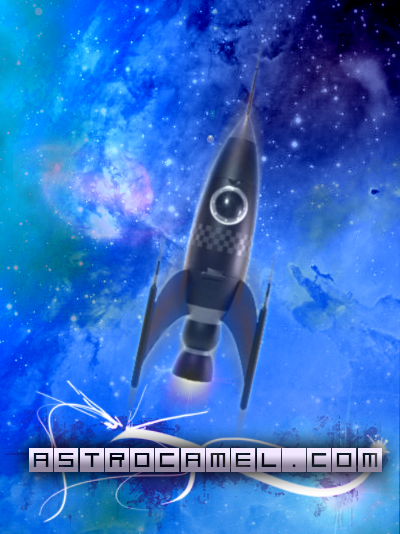
<style>
.page{position:relative;width:400px;height:534px}
.page>*{position:absolute;margin:0}
.t1{font:37px "Qubix"}
</style>
<div class="page">
<p class="t1" style="left:29px;top:448px;width:353px;height:24px">astrocamel.com</p>
</div>
